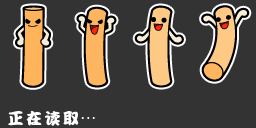
<style>
.page{position:relative;width:256px;height:128px;background:#333333}
.page>*{position:absolute;margin:0}
.t1{font:16px "DFPKanTingLiuW9";letter-spacing:0.15em;color:#ffffff}
</style>
<div class="page">
<p class="t1" style="left:8px;top:110px;width:71px;height:16px">正在读取</p>
</div>
